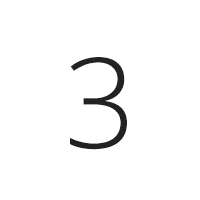
<style>
.page{position:relative;width:200px;height:200px;background:#ffffff}
.page>*{position:absolute;margin:0}
.t1{font:125.2px "OpenSans-Light";color:#222222}
</style>
<div class="page">
<p class="t1" style="left:70px;top:57px;width:57px;height:93px">3</p>
</div>
